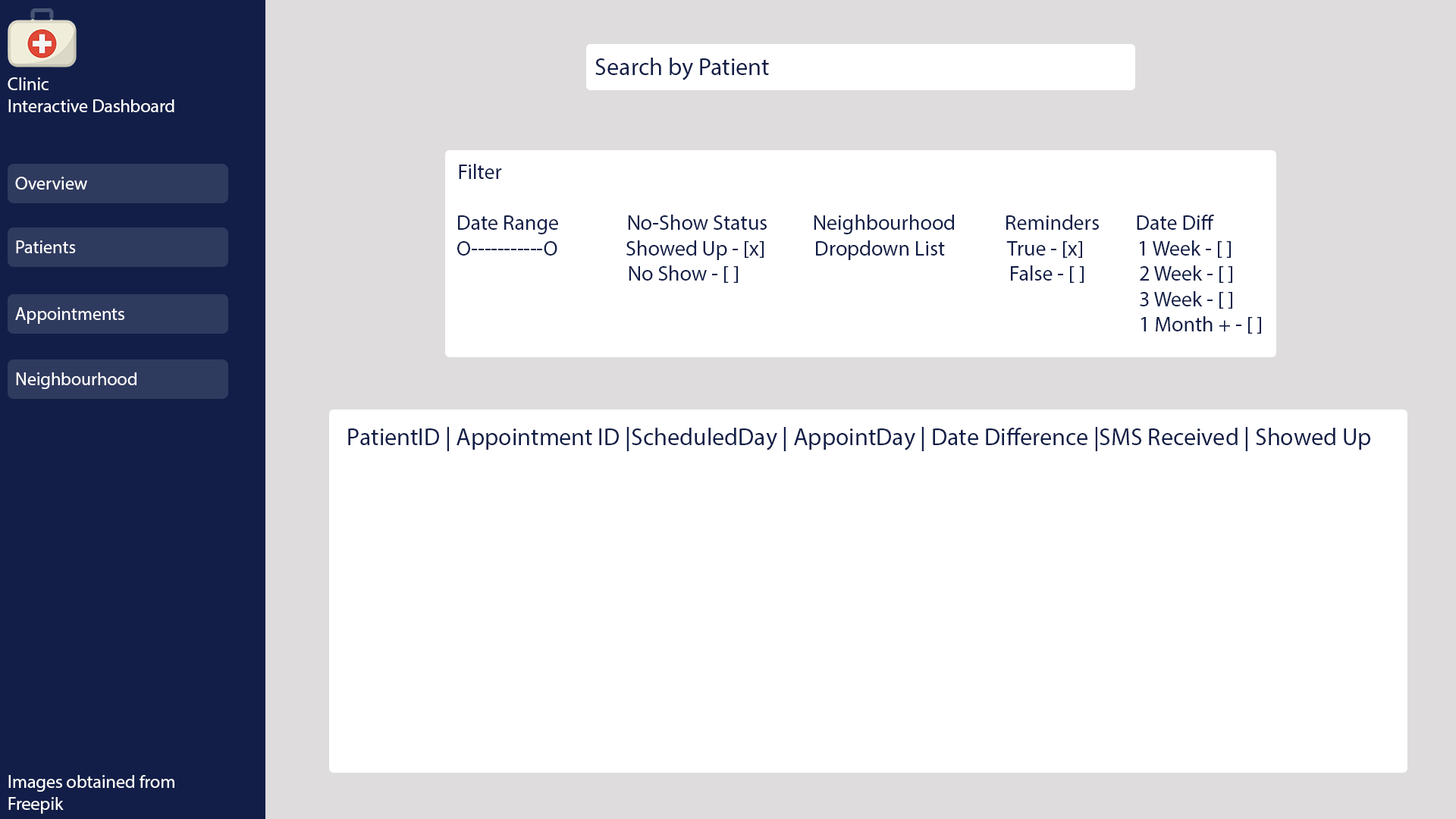
<style>
.page{position:relative;width:1456px;height:819px;background:#ffffff}
.page>*{position:absolute;margin:0}
.t1{font:24.3px "MyriadPro-Regular";color:#121e48}
.t2{font:18.2px "MyriadPro-Regular";color:#ffffff}
.t3{font:21.2px "MyriadPro-Regular";color:#121e48}
</style>
<div class="page">
<p class="t1" style="left:595px;top:58px;width:174px;height:22px">Search by Patient</p>
<p class="t2" style="left:8px;top:77px;width:166px;height:35px">Clinic<br>Interactive Dashboard</p>
<p class="t3" style="left:457px;top:164px;width:804px;height:170px">Filter<br><br>Date Range               No-Show Status          Neighbourhood           Reminders        Date Diff<br>O-----------O               Showed Up - [x]           Dropdown List              True - [x]            1 Week - [ ]<br>                                      No Show - [ ]                                                            False - [ ]            2 Week - [ ]<br>                         3 Week - [ ]<br>                         1 Month + - [ ]</p>
<p class="t2" style="left:15px;top:177px;width:72px;height:13px">Overview</p>
<p class="t2" style="left:16px;top:240px;width:60px;height:13px">Patients</p>
<p class="t2" style="left:15px;top:307px;width:109px;height:17px">Appointments</p>
<p class="t2" style="left:16px;top:372px;width:120px;height:17px">Neighbourhood</p>
<p class="t1" style="left:348px;top:427px;width:1022px;height:24px">PatientID | Appointment ID |ScheduledDay | AppointDay | Date Difference |SMS Received | Showed Up</p>
<p class="t2" style="left:8px;top:775px;width:166px;height:39px">Images obtained from<br>Freepik</p>
</div>
